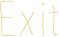
<style>
.page{position:relative;width:59px;height:37px;background:#ffffff}
.page>*{position:absolute;margin:0}
.t1{font:50px "AvenirCondensedHand";color:#eed694}
</style>
<div class="page">
<p class="t1" style="left:0px;top:0px;width:59px;height:37px">Exit</p>
</div>
